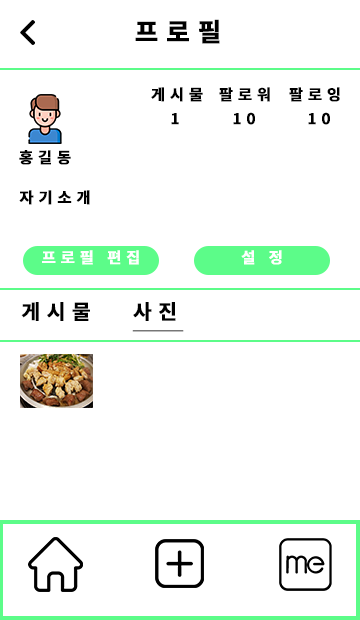
<style>
.page{position:relative;width:360px;height:620px;background:#ffffff}
.page>*{position:absolute;margin:0}
.t1{font:25.2px "NotoSansKR-Bold";letter-spacing:0.3em;color:#000000;font-weight:bold}
.t2{font:15.2px "NotoSansKR-Bold";letter-spacing:0.3em;color:#000000;font-weight:bold}
.t3{font:15.2px "NotoSansKR-Bold";letter-spacing:0.3em;color:#ffffff;font-weight:bold}
.t4{font:20.2px "NotoSansKR-Bold";letter-spacing:0.3em;color:#000000;font-weight:bold}
.t5{font:20.2px "NotoSansKR-Bold";letter-spacing:0.3em;color:#000000;font-weight:bold;text-decoration:underline}
</style>
<div class="page">
<p class="t1" style="left:135px;top:19px;width:85px;height:25px">프로필</p>
<p class="t2" style="left:151px;top:87px;width:52px;height:15px">게시물</p>
<p class="t2" style="left:219px;top:87px;width:51px;height:15px">팔로워</p>
<p class="t2" style="left:289px;top:87px;width:51px;height:15px">팔로잉</p>
<p class="t2" style="left:171px;top:113px;width:8px;height:12px">1</p>
<p class="t2" style="left:233px;top:112px;width:22px;height:13px">10</p>
<p class="t2" style="left:308px;top:112px;width:22px;height:13px">10</p>
<p class="t2" style="left:19px;top:150px;width:52px;height:15px">홍길동</p>
<p class="t2" style="left:19px;top:190px;width:71px;height:15px">자기소개</p>
<p class="t3" style="left:42px;top:250px;width:97px;height:15px">프로필 편집</p>
<p class="t3" style="left:241px;top:250px;width:41px;height:15px">설 정</p>
<p class="t4" style="left:21px;top:302px;width:69px;height:19px">게시물</p>
<p class="t5" style="left:132px;top:302px;width:52px;height:30px">사진</p>
</div>
